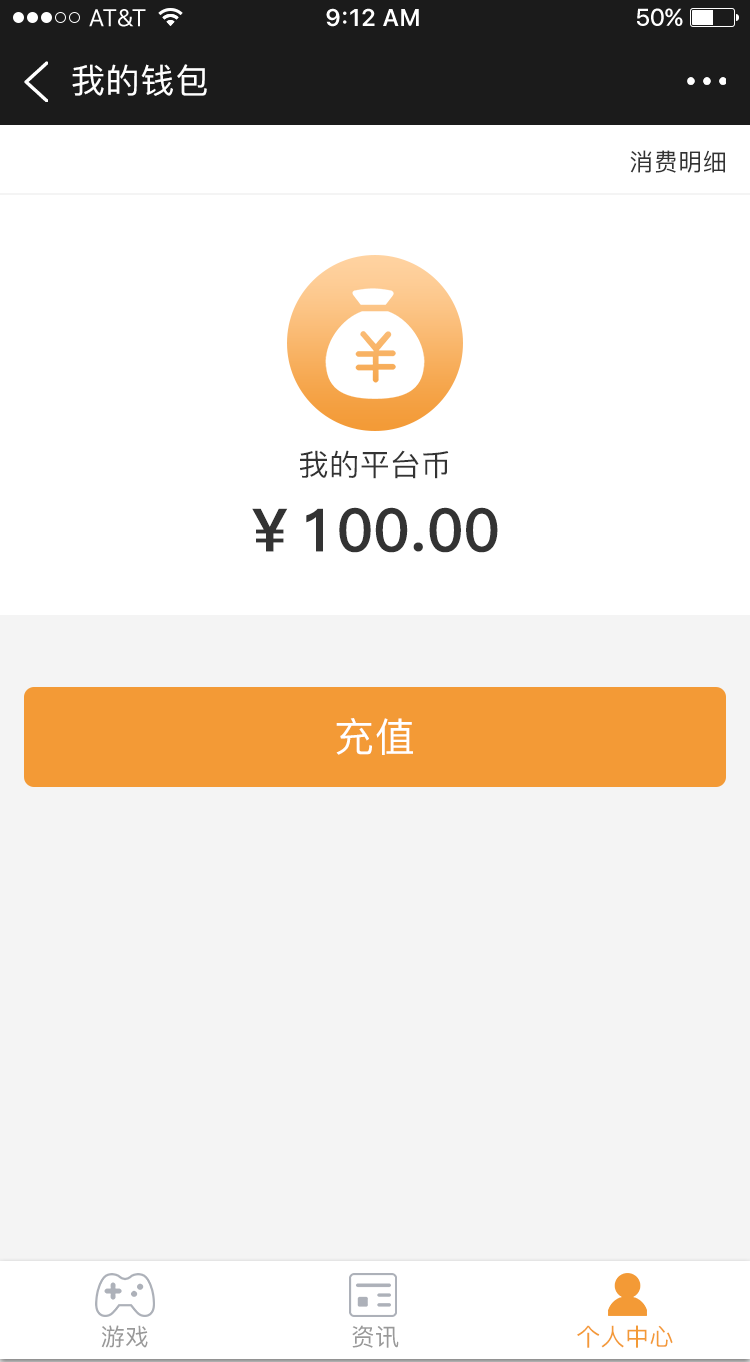
<style>
.page{position:relative;width:750px;height:1362px;background:#ffffff}
.page>*{position:absolute;margin:0}
.t1{font:34px "PingFang-SC-Medium";letter-spacing:0.02em;color:#ffffff}
.t2{font:24px "PingFang-SC-Medium";letter-spacing:0.02em;color:#333333}
.t3{font:30px "PingFang-SC-Medium";letter-spacing:0.02em;color:#333333}
.t4{font:60px "PingFang-SC-Heavy";letter-spacing:0.01em;color:#333333}
.t5{font:40px "PingFang-SC-Medium";letter-spacing:0.02em;color:#ffffff}
.t6{font:24px "PingFang-SC-Medium";letter-spacing:0.02em;color:#999999}
.t7{font:24px "PingFang-SC-Medium";letter-spacing:0.02em;color:#f39a36}
</style>
<div class="page">
<p class="t1" style="left:72px;top:64px;width:135px;height:32px">我的钱包</p>
<p class="t2" style="left:630px;top:150px;width:95px;height:23px">消费明细</p>
<p class="t3" style="left:300px;top:450px;width:149px;height:29px">我的平台币</p>
<p class="t4" style="left:252px;top:507px;width:246px;height:46px">￥100.00</p>
<p class="t5" style="left:336px;top:718px;width:77px;height:37px">充值</p>
<p class="t6" style="left:101px;top:1325px;width:47px;height:23px">游戏</p>
<p class="t6" style="left:352px;top:1325px;width:47px;height:23px">资讯</p>
<p class="t7" style="left:577px;top:1325px;width:96px;height:23px">个人中心</p>
</div>
